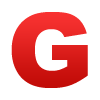
<style>
.page{position:relative;width:100px;height:100px;background:#ffffff}
.page>*{position:absolute;margin:0}
.t1{font:104.4px "Arial-Black";letter-spacing:0.01em}
</style>
<div class="page">
<p class="t1" style="left:11px;top:12px;width:77px;height:76px">G</p>
</div>
